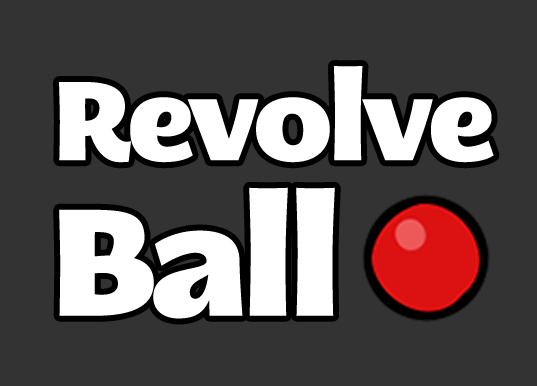
<style>
.page{position:relative;width:537px;height:386px;background:#333333}
.page>*{position:absolute;margin:0}
.t1{font:112px "MEgalopolisExtra";letter-spacing:-0.05em;color:#ffffff}
.t2{font:152px "MEgalopolisExtra";letter-spacing:-0.05em;color:#ffffff}
</style>
<div class="page">
<p class="t1" style="left:59px;top:66px;width:435px;height:97px">Revolve</p>
<p class="t2" style="left:59px;top:187px;width:276px;height:132px">Ball</p>
</div>
